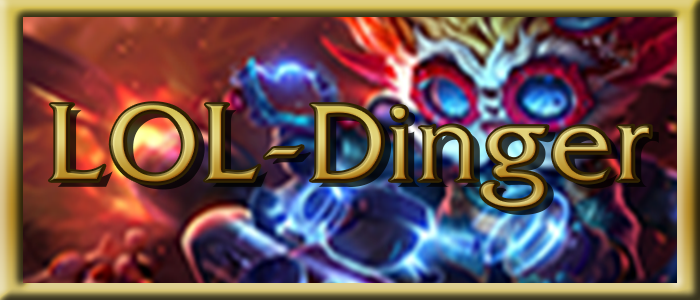
<style>
.page{position:relative;width:700px;height:300px}
.page>*{position:absolute;margin:0}
.t1{font:128px "FrizQuadrata-Thin"}
</style>
<div class="page">
<p class="t1" style="left:49px;top:103px;width:602px;height:106px">LOL-Dinger</p>
</div>
